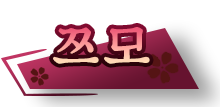
<style>
.page{position:relative;width:220px;height:107px;background:#ffffff}
.page>*{position:absolute;margin:0}
.t1{font:51.5px "SDKukdetopokki-aLt";letter-spacing:0.06em}
</style>
<div class="page">
<p class="t1" style="left:53px;top:27px;width:97px;height:37px">쯔모</p>
</div>
